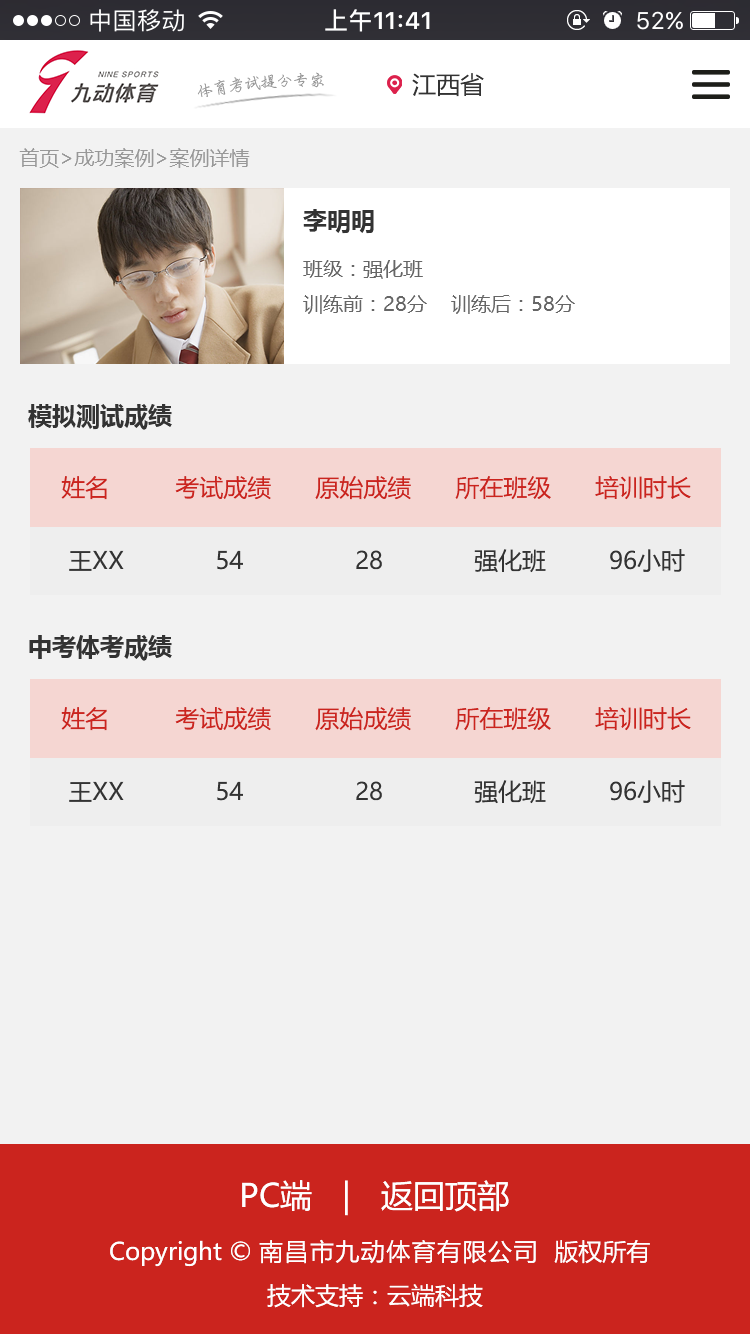
<style>
.page{position:relative;width:750px;height:1334px;background:#f2f2f2}
.page>*{position:absolute;margin:0}
.t1{font:16px "PensinkaiEG-Medium-GB";color:#8e8e8e}
.t2{font:24px "MicrosoftYaHei";color:#333333}
.t3{font:20px "MicrosoftYaHei";color:#989898}
.t4{font:24px "MicrosoftYaHei-Bold";color:#333333}
.t5{font:20px "MicrosoftYaHei";color:#666666}
.t6{font:24px "MicrosoftYaHei";color:#cb241e}
.t7{font:32px "MicrosoftYaHei";color:#ffffff}
.t8{font:24px "MicrosoftYaHei";color:#ffffff}
.t9{font:24px "MicrosoftYaHei";letter-spacing:0.06em;color:#ffffff}
</style>
<div class="page">
<p class="t1" style="left:197px;top:72px;width:127px;height:25px;rotate:4deg">体育考试提分专家</p>
<p class="t2" style="left:412px;top:73px;width:72px;height:24px">江西省</p>
<p class="t3" style="left:19px;top:148px;width:231px;height:20px">首页&gt;成功案例&gt;案例详情</p>
<p class="t4" style="left:303px;top:209px;width:71px;height:25px">李明明</p>
<p class="t5" style="left:303px;top:260px;width:272px;height:54px">班级：强化班<br>训练前：28分    训练后：58分</p>
<p class="t4" style="left:28px;top:404px;width:144px;height:26px">模拟测试成绩</p>
<p class="t6" style="left:61px;top:476px;width:46px;height:24px">姓名</p>
<p class="t6" style="left:175px;top:476px;width:96px;height:24px">考试成绩</p>
<p class="t6" style="left:315px;top:476px;width:96px;height:24px">原始成绩</p>
<p class="t6" style="left:455px;top:476px;width:96px;height:24px">所在班级</p>
<p class="t6" style="left:595px;top:476px;width:96px;height:24px">培训时长</p>
<p class="t2" style="left:69px;top:549px;width:616px;height:24px">王XX             54                28             强化班         96小时</p>
<p class="t4" style="left:29px;top:635px;width:143px;height:26px">中考体考成绩</p>
<p class="t6" style="left:61px;top:707px;width:46px;height:24px">姓名</p>
<p class="t6" style="left:175px;top:707px;width:96px;height:24px">考试成绩</p>
<p class="t6" style="left:315px;top:707px;width:96px;height:24px">原始成绩</p>
<p class="t6" style="left:455px;top:707px;width:96px;height:24px">所在班级</p>
<p class="t6" style="left:595px;top:707px;width:96px;height:24px">培训时长</p>
<p class="t2" style="left:69px;top:780px;width:616px;height:24px">王XX             54                28             强化班         96小时</p>
<p class="t7" style="left:242px;top:1180px;width:267px;height:36px">PC端   |   返回顶部</p>
<p class="t8" style="left:110px;top:1239px;width:540px;height:28px">Copyright © <span class="t9">南昌市九动体育有限公司 </span> 版权所有</p>
<p class="t8" style="left:267px;top:1284px;width:216px;height:24px">技术支持：云端科技</p>
</div>
